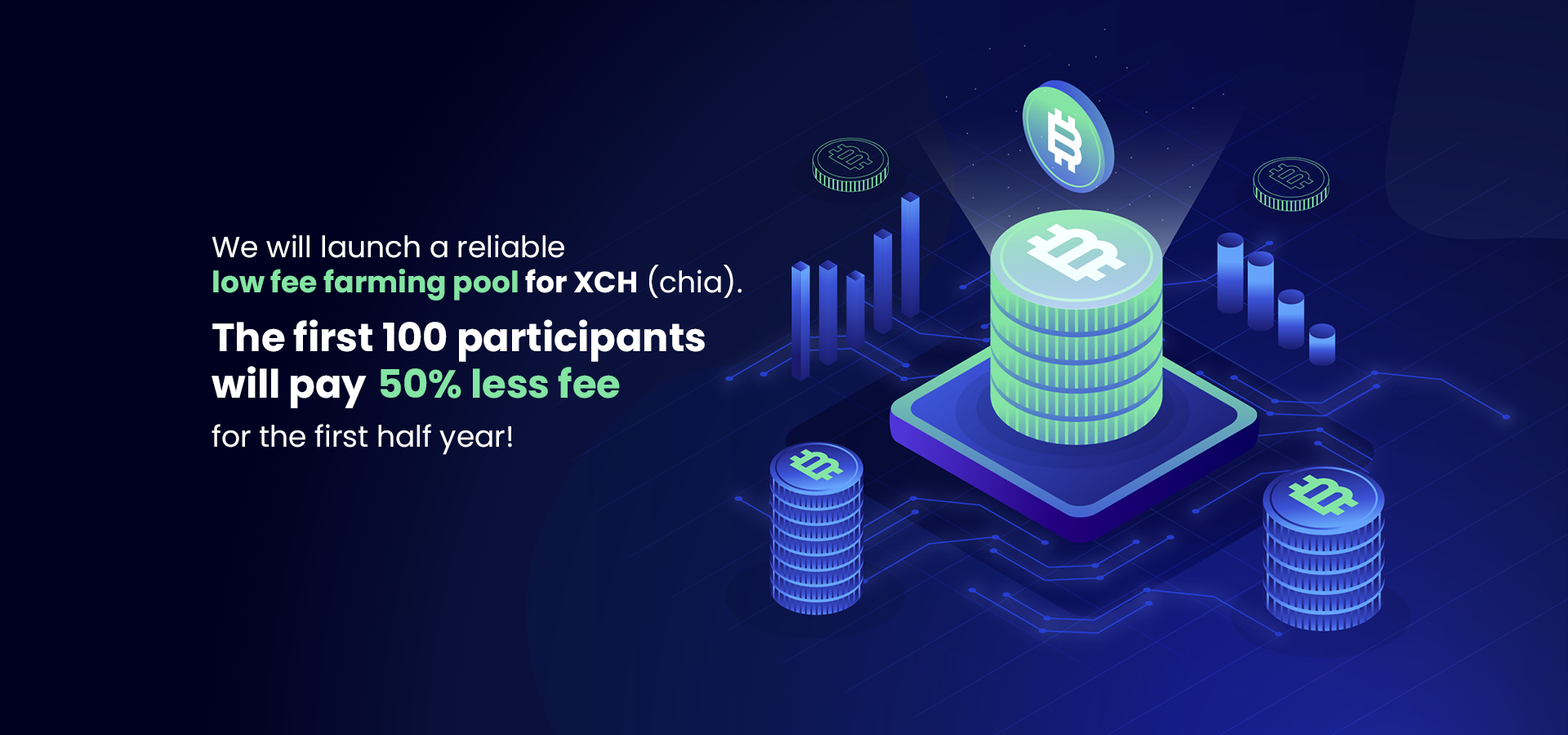
<style>
.page{position:relative;width:1568px;height:735px}
.page>*{position:absolute;margin:0}
.t1{font:39.2px "Poppins-Bold";color:#ffffff}
.t2{font:29.4px "Poppins-Regular";color:#ffffff}
.t3{font:29.4px "Poppins-Bold";color:#84e4a4}
.t4{font:29.4px "Poppins-Bold";color:#ffffff}
.t5{font:39.2px "Poppins-Bold";color:#84e4a4}
.t6{font:29.4px/49px "Poppins-Regular";color:#ffffff}
</style>
<div class="page">
<p class="t1" style="left:212px;top:234px;width:530px;height:221px"><span class="t2">We will launch a reliable<br></span><span class="t3">low fee farming pool</span><span class="t4"> for XCH</span><span class="t2"> (chia).<br></span>The first 100 participants will pay <span class="t5">50% less fee<br></span><span class="t6">for the first half year!</span></p>
</div>
